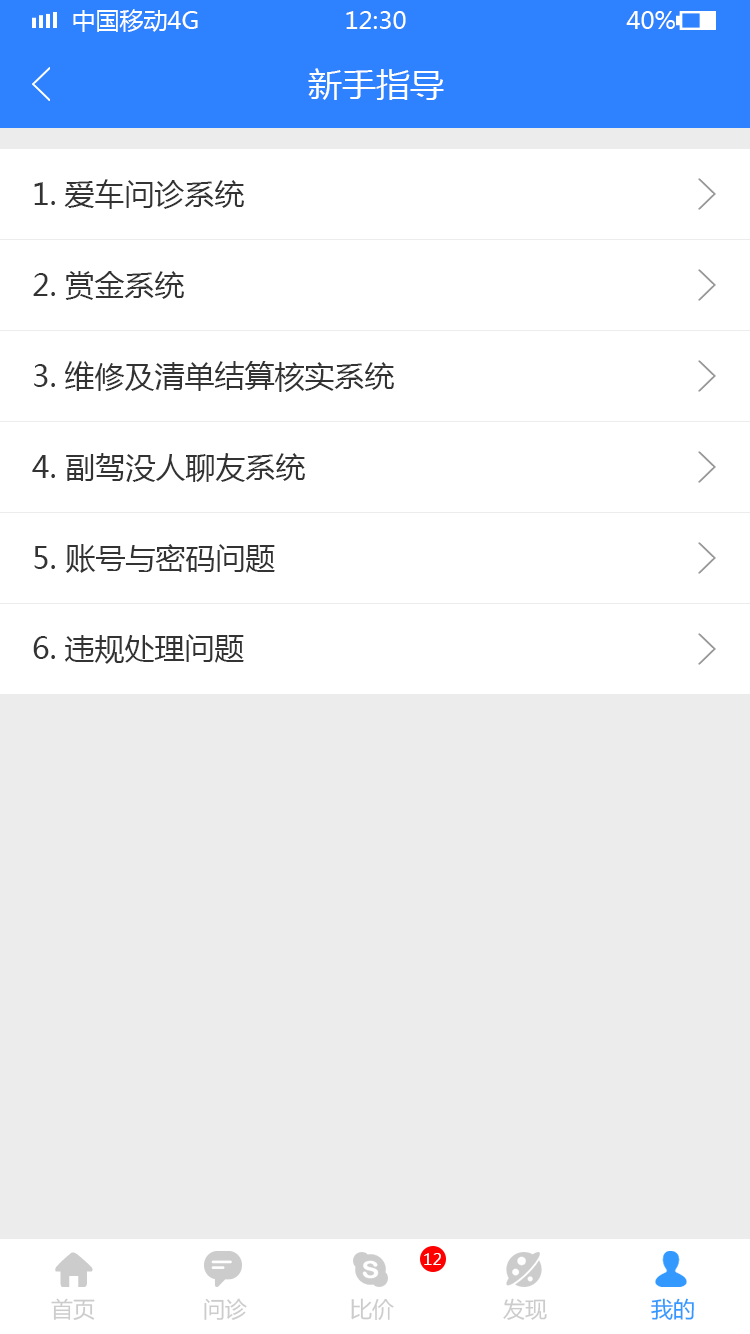
<style>
.page{position:relative;width:750px;height:1334px;background:#ffffff}
.page>*{position:absolute;margin:0}
.t1{font:24px "MicrosoftYaHei";color:#ffffff;text-transform:uppercase}
.t2{font:34px "MicrosoftYaHei";color:#ffffff}
.t3{font:30px "MicrosoftYaHei";color:#333333}
.t4{font:16px "MicrosoftYaHei";color:#ffffff}
.t5{font:22px "MicrosoftYaHei";color:#cccccc}
.t6{font:22px "MicrosoftYaHei";color:#3399ff}
</style>
<div class="page">
<p class="t1" style="left:73px;top:9px;width:125px;height:23px">中国移动4G</p>
<p class="t1" style="left:346px;top:11px;width:60px;height:18px">12:30</p>
<p class="t1" style="left:626px;top:11px;width:49px;height:18px">40%</p>
<p class="t2" style="left:308px;top:68px;width:136px;height:32px">新手指导</p>
<p class="t3" style="left:34px;top:179px;width:210px;height:30px">1.爱车问诊系统</p>
<p class="t3" style="left:33px;top:271px;width:151px;height:29px">2.赏金系统</p>
<p class="t3" style="left:34px;top:361px;width:360px;height:31px">3.维修及清单结算核实系统</p>
<p class="t3" style="left:32px;top:453px;width:273px;height:29px">4. 副驾没人聊友系统</p>
<p class="t3" style="left:34px;top:544px;width:241px;height:29px">5. 账号与密码问题</p>
<p class="t3" style="left:33px;top:634px;width:211px;height:30px">6.违规处理问题</p>
<p class="t4" style="left:424px;top:1253px;width:17px;height:12px">12</p>
<p class="t5" style="left:51px;top:1298px;width:44px;height:22px">首页</p>
<p class="t5" style="left:204px;top:1298px;width:43px;height:22px">问诊</p>
<p class="t5" style="left:351px;top:1298px;width:43px;height:22px">比价</p>
<p class="t5" style="left:503px;top:1298px;width:44px;height:22px">发现</p>
<p class="t6" style="left:651px;top:1298px;width:43px;height:22px">我的</p>
</div>
